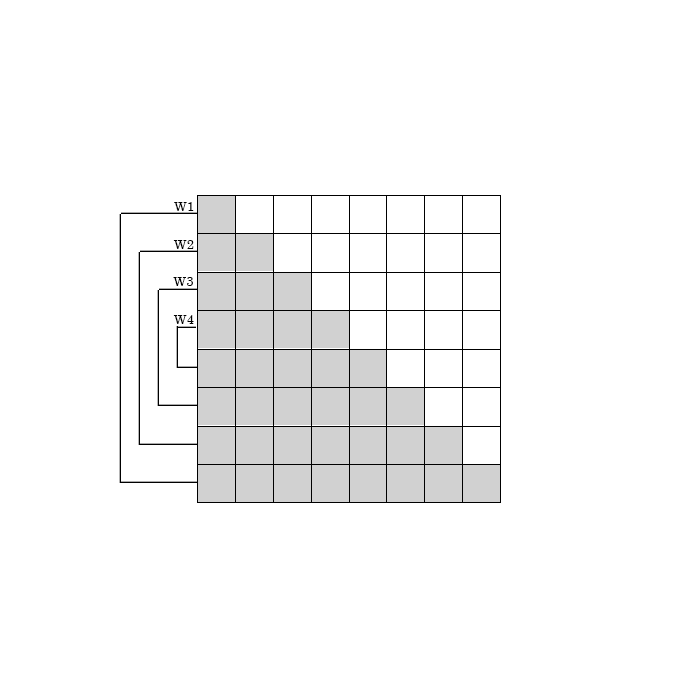
<style>
.page{position:relative;width:700px;height:700px;background:#ffffff}
.page>*{position:absolute;margin:0}
.t1{font:13.3px "Century";color:#000000}
</style>
<div class="page">
<p class="t1" style="left:174px;top:202px;width:20px;height:9px">W1</p>
<p class="t1" style="left:173px;top:240px;width:21px;height:9px">W2</p>
<p class="t1" style="left:173px;top:277px;width:20px;height:9px">W3</p>
<p class="t1" style="left:173px;top:315px;width:21px;height:9px">W4</p>
</div>
